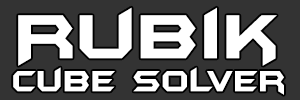
<style>
.page{position:relative;width:300px;height:100px;background:#333333}
.page>*{position:absolute;margin:0}
.t1{font:73px "BatmanForeverAlternate";color:#ffffff}
.t2{font:34.4px "BatmanForeverAlternate";color:#ffffff;scale:0.93 1}
</style>
<div class="page">
<p class="t1" style="left:18px;top:7px;width:259px;height:59px">Rubik</p>
<p class="t2" style="left:13px;top:67px;width:271px;height:28px">cube solver</p>
</div>
